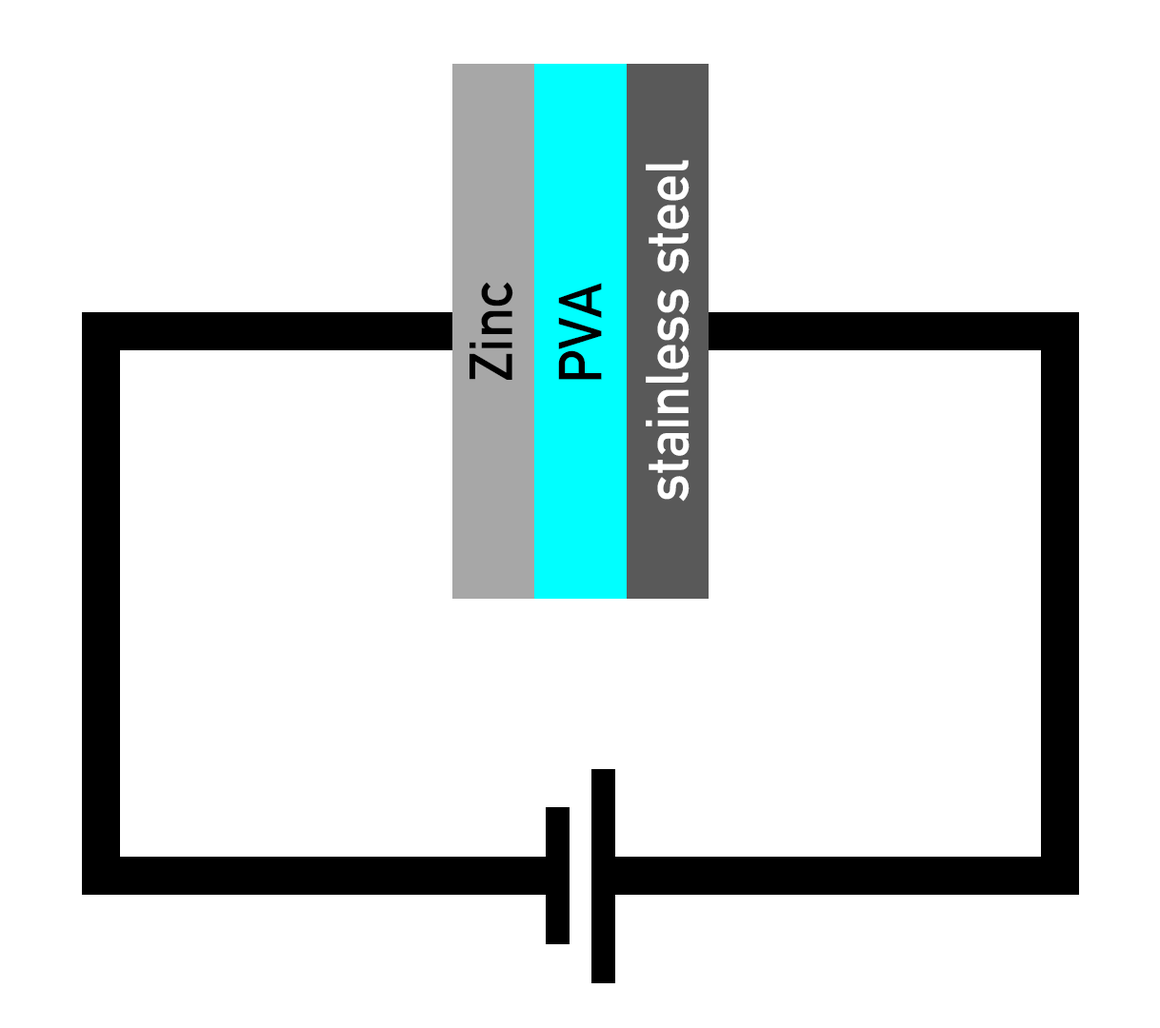
<style>
.page{position:relative;width:1160px;height:1028px;background:#ffffff}
.page>*{position:absolute;margin:0}
.t1{font:60px "DIN-1451-Mittelschrift-Regular";color:#ffffff;scale:0.95 1}
.t2{font:60px "DIN-1451-Mittelschrift-Regular";color:#000000;scale:0.95 1}
</style>
<div class="page">
<p class="t1" style="left:646px;top:160px;width:43px;height:342px;rotate:-90deg">stainless steel</p>
<p class="t2" style="left:469px;top:282px;width:44px;height:98px;rotate:-90deg">Zinc</p>
<p class="t2" style="left:558px;top:283px;width:44px;height:97px;rotate:-90deg">PVA</p>
</div>
